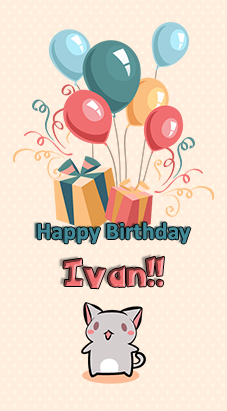
<style>
.page{position:relative;width:227px;height:411px;background:#ffeede}
.page>*{position:absolute;margin:0}
.t1{font:24px "Calibri-Bold";color:#438b99}
.t2{font:30px "PokemonSolidNormal";letter-spacing:0.1em}
</style>
<div class="page">
<p class="t1" style="left:37px;top:222px;width:154px;height:22px">Happy Birthday</p>
<p class="t2" style="left:63px;top:256px;width:101px;height:33px">Ivan!!</p>
</div>
